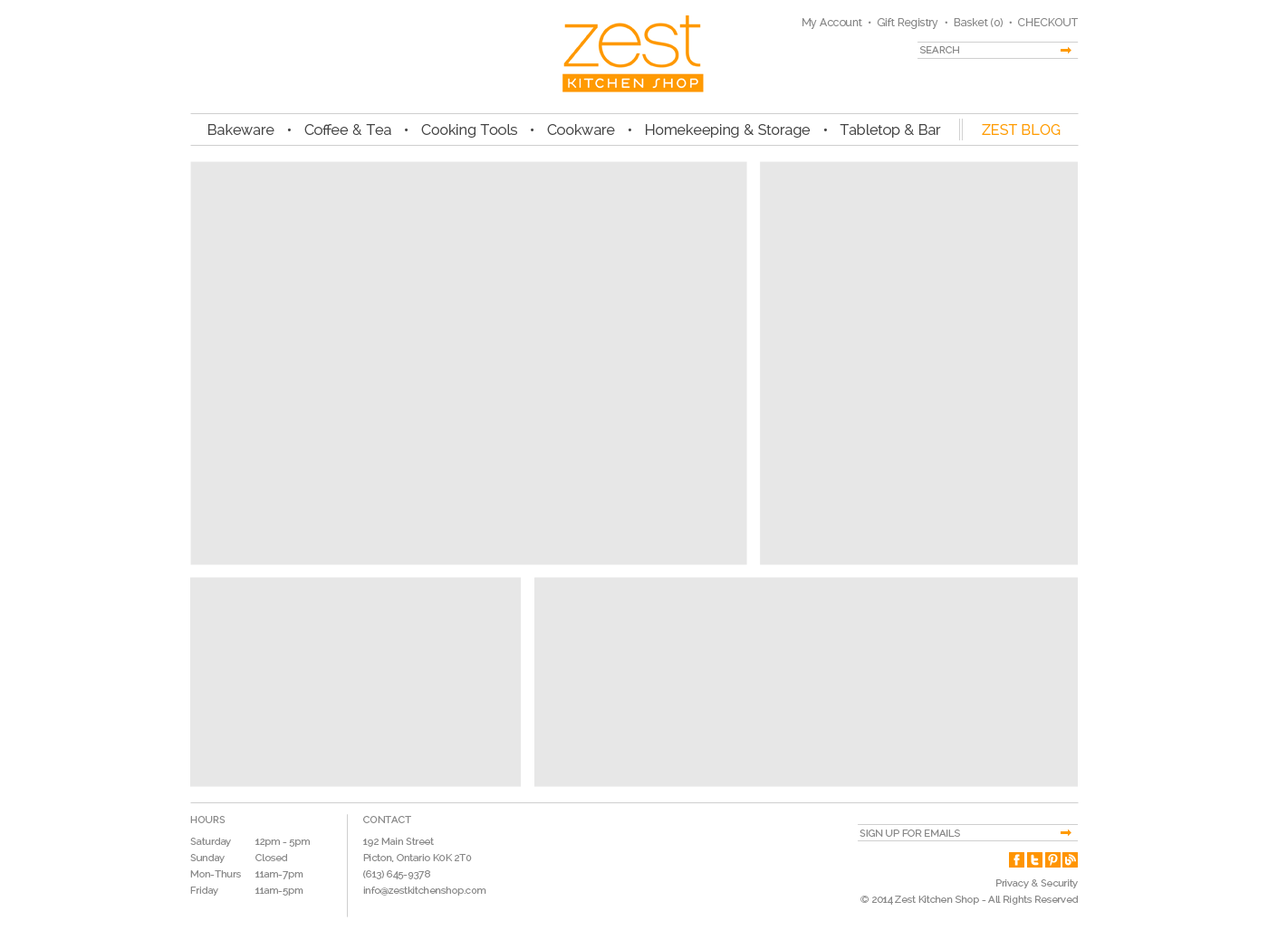
<style>
.page{position:relative;width:1268px;height:940px;background:#ffffff}
.page>*{position:absolute;margin:0}
.t1{font:10.9px "Raleway-Regular";color:#898989}
.t2{font:10px "Raleway-Regular";color:#898989;text-transform:uppercase}
.t3{font:14.5px "Raleway-Regular";color:#464646}
.t4{font:14.5px "Raleway-Regular";color:#ff9b00}
.t5{font:10px/16.3px "Raleway-Regular";color:#898989}
.t6{font:10px/38px "Raleway-Regular";color:#898989;text-transform:uppercase}
.t7{font:10px/21.7px "Raleway-Regular";color:#898989}
</style>
<div class="page">
<p class="t1" style="left:803px;top:18px;width:275px;height:11px">My Account  •  Gift Registry  •  Basket (0)  •  CHECKOUT</p>
<p class="t2" style="left:919px;top:46px;width:40px;height:7px">Search</p>
<p class="t3" style="left:208px;top:124px;width:733px;height:14px">Bakeware   •   Coffee &amp; Tea   •   Cooking Tools   •   Cookware   •   Homekeeping &amp; Storage   •   Tabletop &amp; Bar</p>
<p class="t4" style="left:982px;top:124px;width:79px;height:11px">ZEST BLOG</p>
<p class="t5" style="left:190px;top:816px;width:120px;height:80px"><span class="t6">HOURS<br></span><span class="t7">Saturday 12pm - 5pm<br></span>Sunday Closed<br>Mon-Thurs 11am-7pm<br>Friday  11am-5pm</p>
<p class="t5" style="left:363px;top:816px;width:123px;height:80px"><span class="t6">Contact<br></span><span class="t7">192 Main Street</span> <br>Picton, Ontario K0K 2T0<br>(613) 645-9378<br>info@zestkitchenshop.com</p>
<p class="t2" style="left:860px;top:830px;width:100px;height:7px">Sign up for emails</p>
<p class="t5" style="left:861px;top:880px;width:217px;height:25px;text-align:right"><span class="t7">Privacy &amp; Security<br></span>© 2014 Zest Kitchen Shop - All Rights Reserved</p>
</div>
